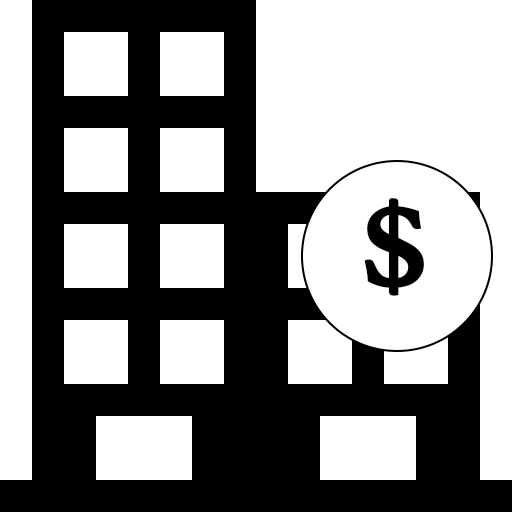
<style>
.page{position:relative;width:512px;height:512px;background:#ffffff}
.page>*{position:absolute;margin:0}
.t1{font:125px "Athelas-Regular";color:#000000;font-weight:bold;scale:1.1 1}
</style>
<div class="page">
<p class="t1" style="left:364px;top:198px;width:60px;height:98px">$</p>
</div>
